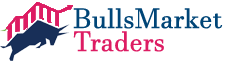
<style>
.page{position:relative;width:225px;height:61px;background:#ffffff}
.page>*{position:absolute;margin:0}
.t1{font:27.6px/23px "JavaneseText";letter-spacing:0.005em;color:#004577}
.t2{font:27.6px/23px "JavaneseText";letter-spacing:0.005em;color:#dd1c63}
</style>
<div class="page">
<p class="t1" style="left:73px;top:8px;width:150px;height:44px">BullsMarket<br><span class="t2">Traders</span></p>
</div>
